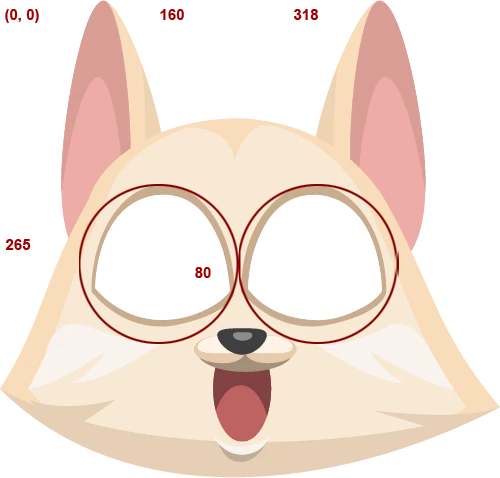
<style>
.page{position:relative;width:500px;height:478px;background:#ffffff}
.page>*{position:absolute;margin:0}
.t1{font:15px "Arial-BoldMT";color:#a00000}
</style>
<div class="page">
<p class="t1" style="left:5px;top:9px;width:34px;height:14px">(0, 0)</p>
<p class="t1" style="left:160px;top:9px;width:24px;height:11px">160</p>
<p class="t1" style="left:294px;top:9px;width:24px;height:11px">318</p>
<p class="t1" style="left:5px;top:239px;width:26px;height:11px">265</p>
<p class="t1" style="left:195px;top:267px;width:16px;height:11px">80</p>
</div>
